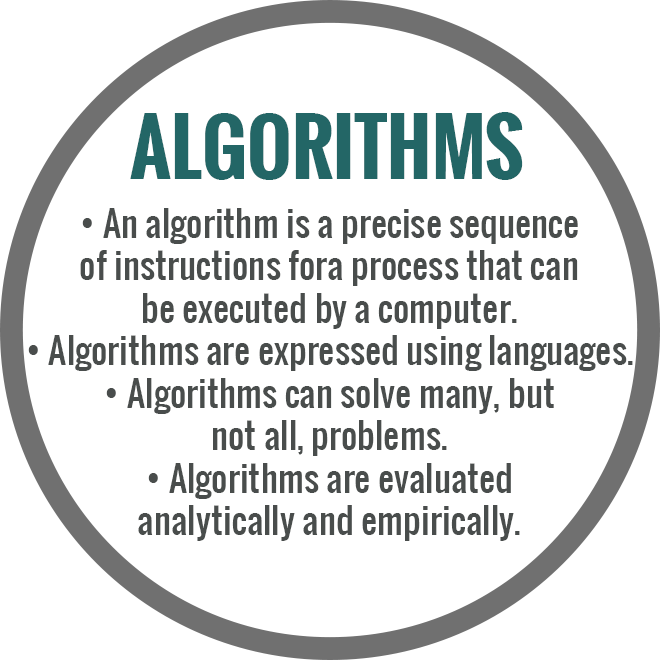
<style>
.page{position:relative;width:660px;height:660px;background:#ffffff}
.page>*{position:absolute;margin:0}
.t1{font:75px "Oswald-Bold";color:#236666}
.t2{font:35.4px "Oswald-Regular";color:#494d4c}
</style>
<div class="page">
<p class="t1" style="left:130px;top:112px;width:393px;height:68px">ALGORITHMS</p>
<p class="t2" style="left:28px;top:208px;width:605px;height:333px;text-align:center">• An algorithm is a precise sequence<br>of instructions fora process that can<br>be executed by a computer.<br>• Algorithms are expressed using languages.<br>• Algorithms can solve many, but<br>not all, problems.<br>• Algorithms are evaluated<br>analytically and empirically.</p>
</div>
